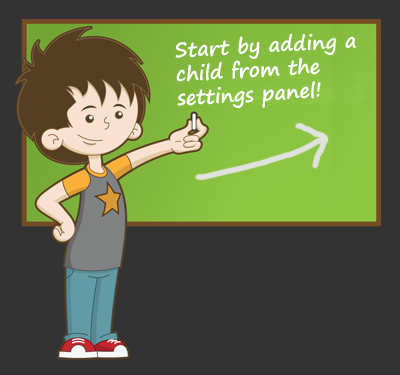
<style>
.page{position:relative;width:400px;height:375px;background:#333333}
.page>*{position:absolute;margin:0}
.t1{font:20px "SegoePrint-Bold";color:#ffffff}
</style>
<div class="page">
<p class="t1" style="left:175px;top:33px;width:181px;height:75px;rotate:-3deg">Start by adding a <br>child from the <br>settings panel!</p>
</div>
